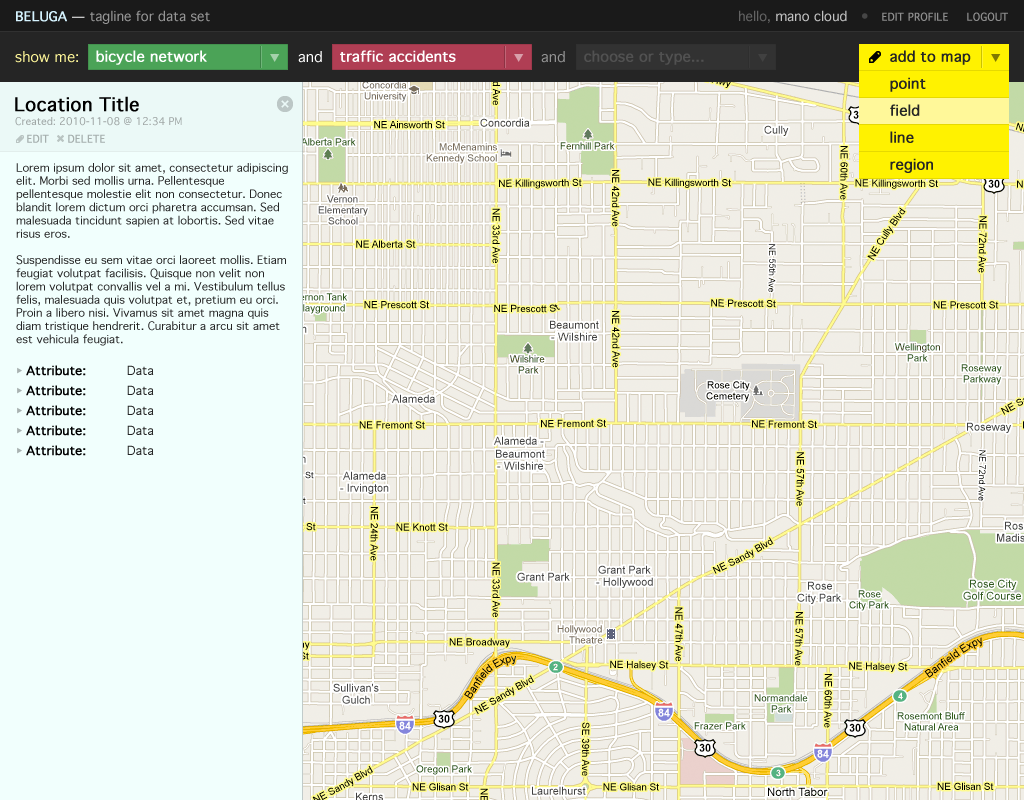
<style>
.page{position:relative;width:1024px;height:800px;background:#f1fffd}
.page>*{position:absolute;margin:0}
.t1{font:13px "Geneva";color:#959595}
.t2{font:13px "Geneva";color:#d5f3ff;font-weight:bold}
.t3{font:13px "Geneva";color:#ffffff}
.t4{font:13px "Geneva";color:#c2c2c2}
.t5{font:13px "Geneva";color:#636363}
.t6{font:13px "Geneva";color:#464646}
.t7{font:10px "Geneva";color:#8d8d8d;font-weight:bold}
.t8{font:14px "Geneva";color:#fff799}
.t9{font:14px "Geneva";color:#ffffff;font-weight:bold}
.t10{font:14px "Geneva";color:#ffffff}
.t11{font:14px "Geneva";color:#929292}
.t12{font:14px "Geneva";color:#515151;font-weight:bold}
.t13{font:14px "Geneva";color:#252525;font-weight:bold}
.t14{font:18px "Geneva";color:#000000;font-weight:bold}
.t15{font:10px "Geneva";color:#a0a7a6}
.t16{font:10px "Geneva";color:#a6afad;font-weight:bold}
.t17{font:11px "Geneva";color:#252525}
.t18{font:12px "Geneva";color:#000000;font-weight:bold}
.t19{font:12px "Geneva";color:#252525}
</style>
<div class="page">
<p class="t1" style="left:16px;top:10px;width:194px;height:14px"><span class="t2">BELUGA</span><span class="t3"> — </span>tagline for data set</p>
<p class="t4" style="left:739px;top:10px;width:129px;height:14px"><span class="t5">hello, </span>mano cloud   <span class="t6">•</span></p>
<p class="t7" style="left:882px;top:12px;width:66px;height:9px">EDIT PROFILE</p>
<p class="t7" style="left:967px;top:12px;width:41px;height:9px">LOGOUT</p>
<p class="t8" style="left:15px;top:51px;width:63px;height:12px">show me:</p>
<p class="t9" style="left:96px;top:50px;width:111px;height:15px">bicycle network</p>
<p class="t10" style="left:298px;top:51px;width:24px;height:12px">and</p>
<p class="t9" style="left:340px;top:50px;width:116px;height:12px">traffic accidents</p>
<p class="t11" style="left:541px;top:51px;width:24px;height:12px">and</p>
<p class="t12" style="left:584px;top:50px;width:120px;height:15px">choose or type...</p>
<p class="t13" style="left:890px;top:50px;width:81px;height:15px">add to map</p>
<p class="t13" style="left:890px;top:77px;width:36px;height:15px">point</p>
<p class="t14" style="left:15px;top:96px;width:124px;height:16px">Location Title</p>
<p class="t13" style="left:890px;top:104px;width:30px;height:12px">field</p>
<p class="t15" style="left:15px;top:117px;width:167px;height:9px">Created: 2010-11-08 @ 12:34 PM</p>
<p class="t16" style="left:27px;top:134px;width:22px;height:9px">EDIT</p>
<p class="t16" style="left:68px;top:134px;width:37px;height:9px">DELETE</p>
<p class="t13" style="left:890px;top:131px;width:24px;height:12px">line</p>
<p class="t13" style="left:890px;top:158px;width:43px;height:15px">region</p>
<p class="t17" style="left:16px;top:163px;width:272px;height:183px">Lorem ipsum dolor sit amet, consectetur adipiscing elit. Morbi sed mollis urna. Pellentesque pellentesque molestie elit non consectetur. Donec blandit lorem dictum orci pharetra accumsan. Sed malesuada tincidunt sapien at lobortis. Sed vitae risus eros.<br><br>Suspendisse eu sem vitae orci laoreet mollis. Etiam feugiat volutpat facilisis. Quisque non velit non lorem volutpat convallis vel a mi. Vestibulum tellus felis, malesuada quis volutpat et, pretium eu orci. Proin a libero nisi. Vivamus sit amet magna quis diam tristique hendrerit. Curabitur a arcu sit amet est vehicula feugiat.</p>
<p class="t18" style="left:26px;top:365px;width:60px;height:11px">Attribute:</p>
<p class="t19" style="left:127px;top:365px;width:27px;height:10px">Data</p>
<p class="t18" style="left:26px;top:385px;width:60px;height:11px">Attribute:</p>
<p class="t19" style="left:127px;top:385px;width:27px;height:10px">Data</p>
<p class="t18" style="left:26px;top:405px;width:60px;height:11px">Attribute:</p>
<p class="t19" style="left:127px;top:405px;width:27px;height:10px">Data</p>
<p class="t18" style="left:26px;top:425px;width:60px;height:11px">Attribute:</p>
<p class="t19" style="left:127px;top:425px;width:27px;height:10px">Data</p>
<p class="t18" style="left:26px;top:445px;width:60px;height:11px">Attribute:</p>
<p class="t19" style="left:127px;top:445px;width:27px;height:10px">Data</p>
</div>
